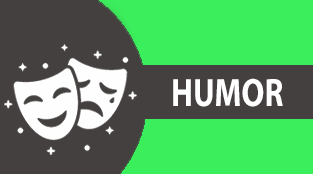
<style>
.page{position:relative;width:313px;height:174px;background:#44403f}
.page>*{position:absolute;margin:0}
.t1{font:39.7px "MyriadPro-Bold";color:#ffffff;scale:0.8 1}
</style>
<div class="page">
<p class="t1" style="left:173px;top:78px;width:110px;height:29px">HUMOR</p>
</div>
